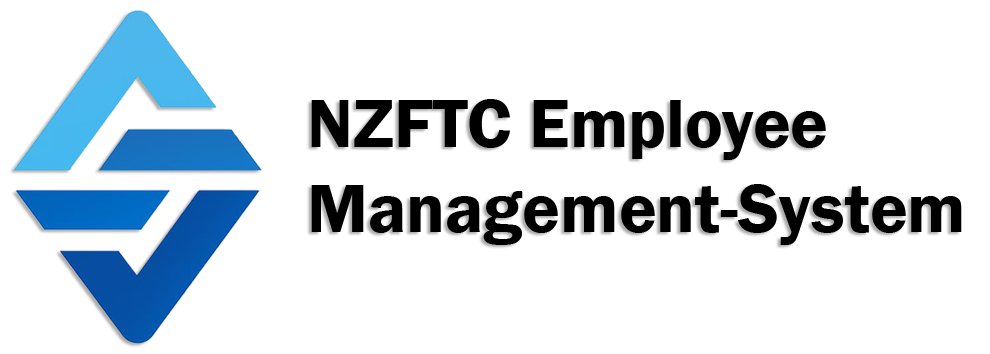
<style>
.page{position:relative;width:990px;height:354px;background:#ffffff}
.page>*{position:absolute;margin:0}
.t1{font:70.8px "FranklinGothic-Demi";color:#000000}
</style>
<div class="page">
<p class="t1" style="left:311px;top:99px;width:651px;height:146px">NZFTC Employee <br>Management-System</p>
</div>
